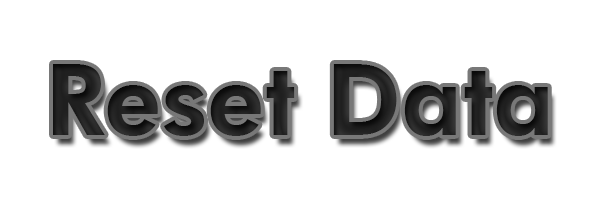
<style>
.page{position:relative;width:600px;height:200px;background:#ffffff}
.page>*{position:absolute;margin:0}
.t1{font:100px "FuturaBT-Heavy";color:#202020}
</style>
<div class="page">
<p class="t1" style="left:53px;top:64px;width:495px;height:72px">Reset Data</p>
</div>
